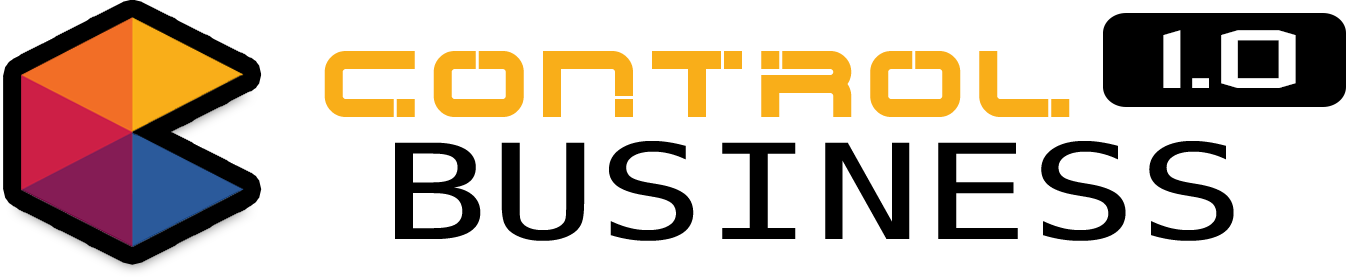
<style>
.page{position:relative;width:1346px;height:277px;background:#ffffff}
.page>*{position:absolute;margin:0}
.t1{font:98px "Militech";color:#ffffff;scale:1.72 1}
.t2{font:72px "Hype-Fixer";letter-spacing:-0.1em;color:#f9ae19}
.t3{font:132px "BitstreamVeraSansMono-Roman";color:#000000;scale:1.36 1}
</style>
<div class="page">
<p class="t1" style="left:1163px;top:30px;width:133px;height:58px">1.0</p>
<p class="t2" style="left:324px;top:51px;width:746px;height:66px">CONTROL</p>
<p class="t3" style="left:395px;top:141px;width:839px;height:100px">BUSINESS</p>
</div>
